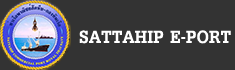
<style>
.page{position:relative;width:235px;height:70px;background:#333333}
.page>*{position:absolute;margin:0}
.t1{font:28px "DilleniaUPCBold";color:#ffffff}
</style>
<div class="page">
<p class="t1" style="left:79px;top:30px;width:152px;height:14px">SATTAHIP E-PORT</p>
</div>
